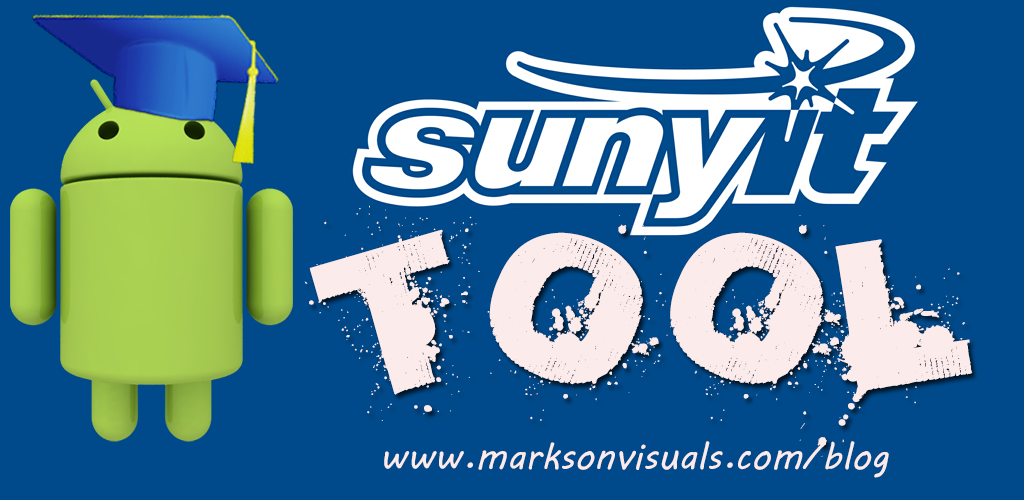
<style>
.page{position:relative;width:1024px;height:500px;background:#004a8b}
.page>*{position:absolute;margin:0}
.t1{font:290.1px "saMmiEs-Sans-serIf-MixeD-Up";color:#fcebeb}
.t2{font:37.4px "MVBoli";color:#fcebeb}
</style>
<div class="page">
<p class="t1" style="left:304px;top:205px;width:669px;height:252px">TOOL</p>
<p class="t2" style="left:384px;top:441px;width:505px;height:37px">www.marksonvisuals.com/blog</p>
</div>
